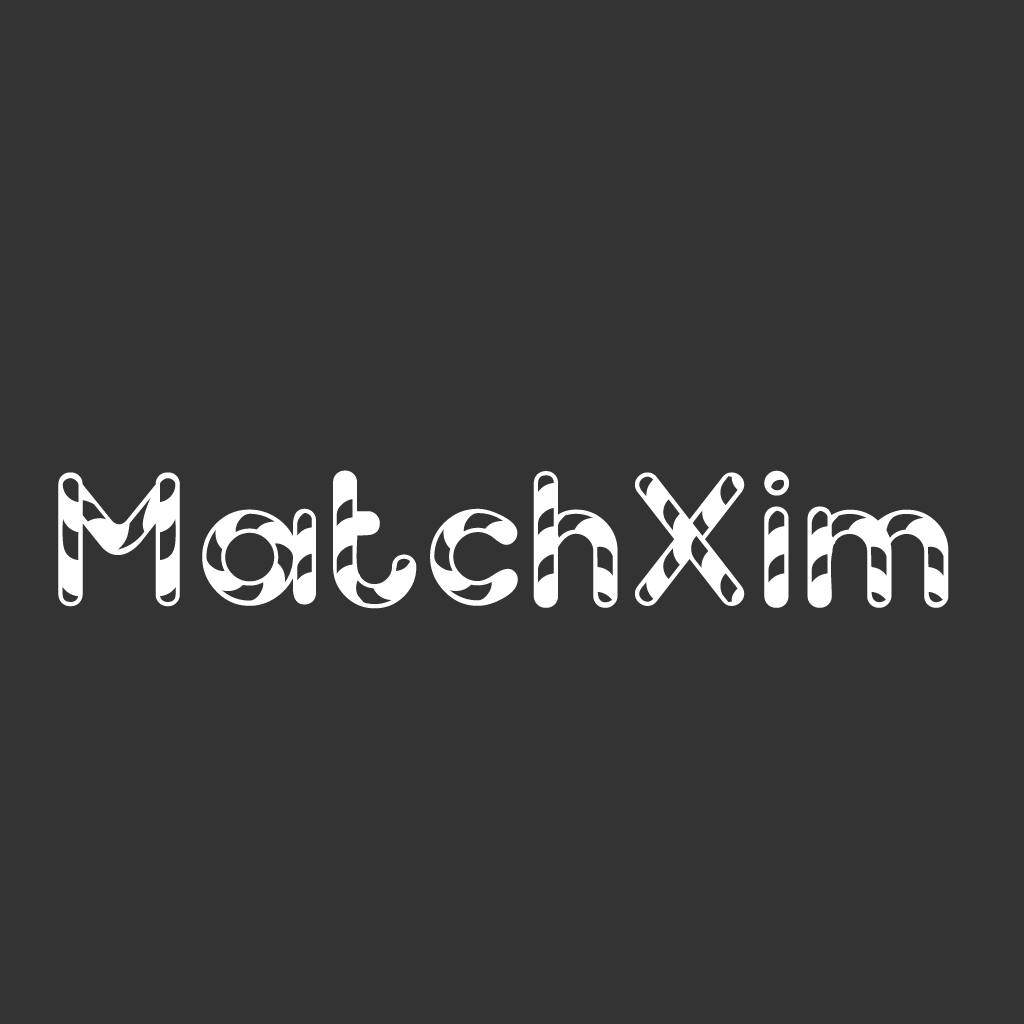
<style>
.page{position:relative;width:1024px;height:1024px;background:#333333}
.page>*{position:absolute;margin:0}
.t1{font:200px "CandyCaneUnregistered";color:#ffffff}
</style>
<div class="page">
<p class="t1" style="left:58px;top:470px;width:891px;height:139px">MatchXim</p>
</div>
